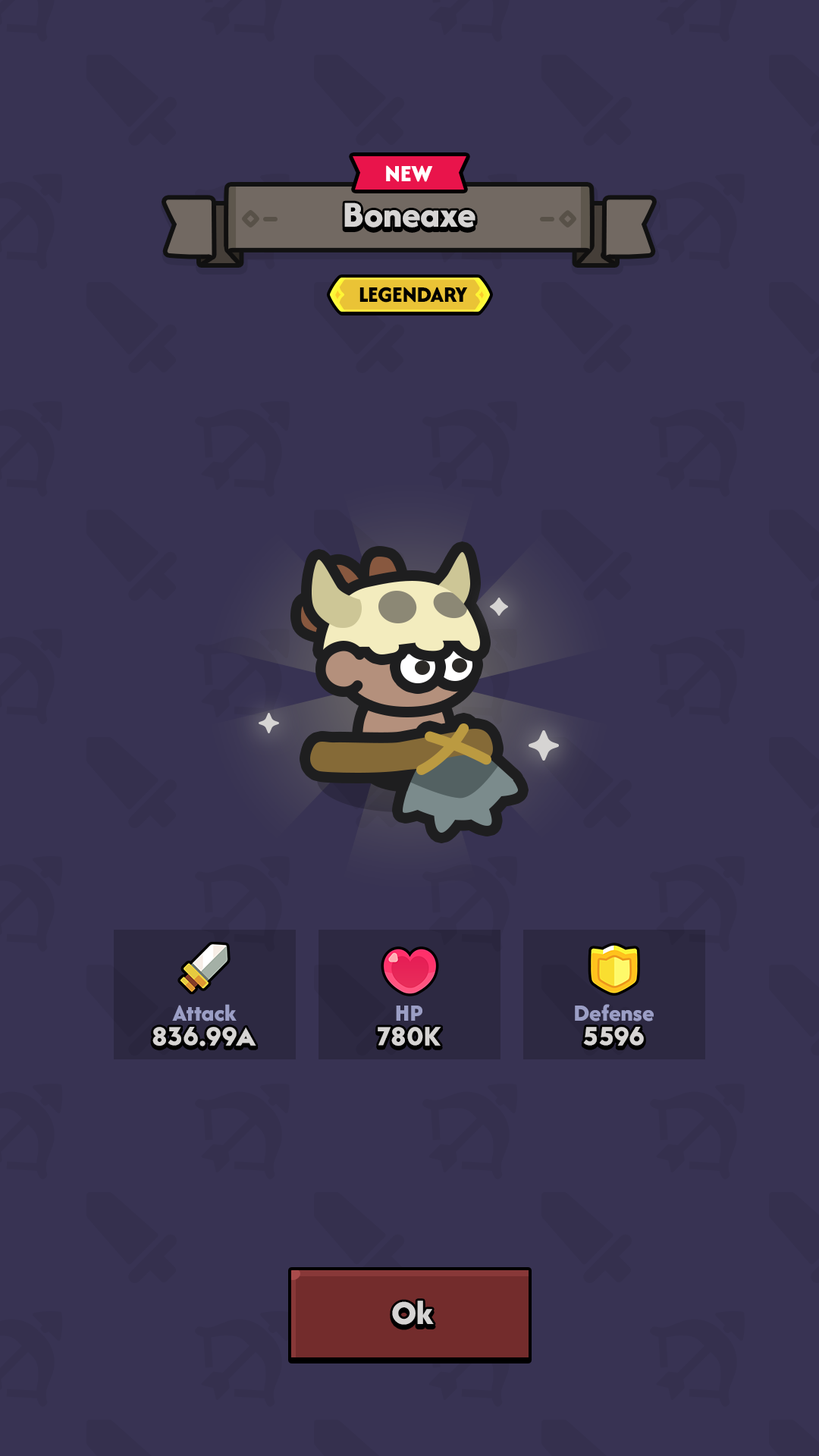
<style>
.page{position:relative;width:819px;height:1456px;background:#383353}
.page>*{position:absolute;margin:0}
.t1{font:24.3px "AfacadFlux-ExtraBold";color:#ffffff;text-transform:uppercase}
.t2{font:37.9px "AfacadFlux-ExtraBold";color:#d6d4d3}
.t3{font:22.9px "AfacadFlux-ExtraBold";letter-spacing:-0.02em;color:#000000;text-transform:uppercase}
.t4{font:24.3px "AfacadFlux-ExtraBold";color:#9b9ec5}
.t5{font:27.3px "LTAvocado-Bold";color:#d6d4d3}
.t6{font:34.9px "AfacadFlux-ExtraBold";color:#d6d4d3}
</style>
<div class="page">
<p class="t1" style="left:386px;top:165px;width:47px;height:17px">New</p>
<p class="t2" style="left:344px;top:202px;width:131px;height:25px">Boneaxe</p>
<p class="t3" style="left:359px;top:287px;width:109px;height:16px">Legendary</p>
<p class="t4" style="left:172px;top:1004px;width:65px;height:17px">Attack</p>
<p class="t4" style="left:396px;top:1006px;width:26px;height:15px">HP</p>
<p class="t4" style="left:575px;top:1004px;width:79px;height:17px">Defense</p>
<p class="t5" style="left:152px;top:1027px;width:104px;height:19px">836.99A</p>
<p class="t5" style="left:378px;top:1027px;width:63px;height:19px">780K</p>
<p class="t5" style="left:583px;top:1027px;width:61px;height:19px">5596</p>
<p class="t6" style="left:392px;top:1301px;width:42px;height:24px">Ok</p>
</div>
